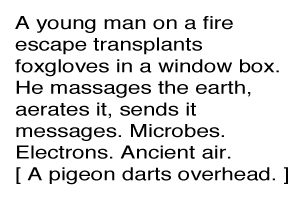
<style>
.page{position:relative;width:300px;height:200px;background:#ffffff}
.page>*{position:absolute;margin:0}
.t1{font:18px "Helvetica";color:#000000;scale:1.24 1}
</style>
<div class="page">
<p class="t1" style="left:15px;top:16px;width:273px;height:169px">A young man on a fire <br>escape transplants <br>foxgloves in a window box.  <br>He massages the earth, <br>aerates it, sends it <br>messages. Microbes. <br>Electrons. Ancient air. <br>[ A pigeon darts overhead. ]</p>
</div>
